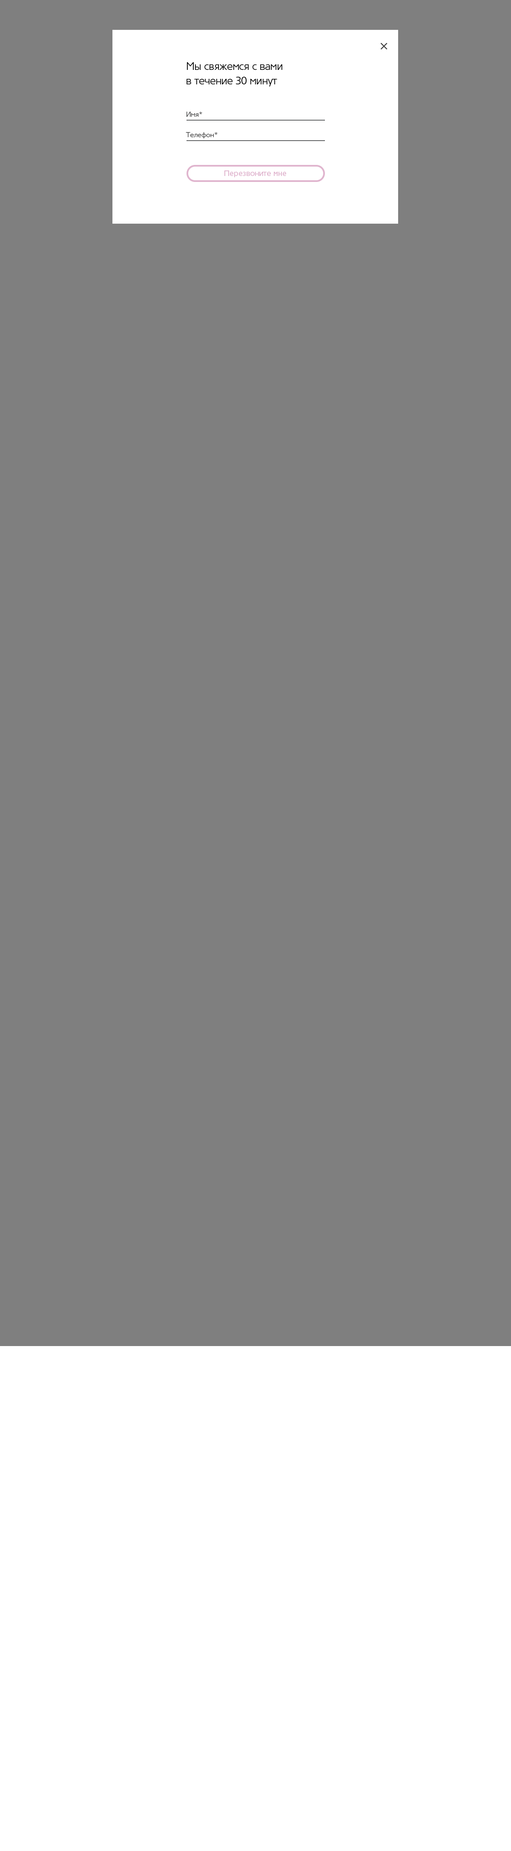
<style>
.page{position:relative;width:511px;height:1851px;background:#7f7f7f}
.page>*{position:absolute;margin:0}
.t1{font:17px "TornadoCyr-Light";color:#414141}
.t2{font:10.3px/14.5px "TornadoCyr-Light";color:#000000}
.t3{font:6.8px/10.2px "TornadoCyr-Light";color:#414141}
.t4{font:7.7px "TornadoCyr-Regular";color:#e0b5ce}
</style>
<div class="page">
<p class="t1" style="left:381px;top:43px;width:7px;height:7px;rotate:45deg">+</p>
<p class="t2" style="left:187px;top:62px;width:96px;height:25px">Мы свяжемся с вами <br>в течение 30 минут</p>
<p class="t3" style="left:186px;top:112px;width:32px;height:26px">Имя*<br><br>Телефон*</p>
<p class="t4" style="left:225px;top:170px;width:61px;height:7px">Перезвоните мне</p>
</div>
